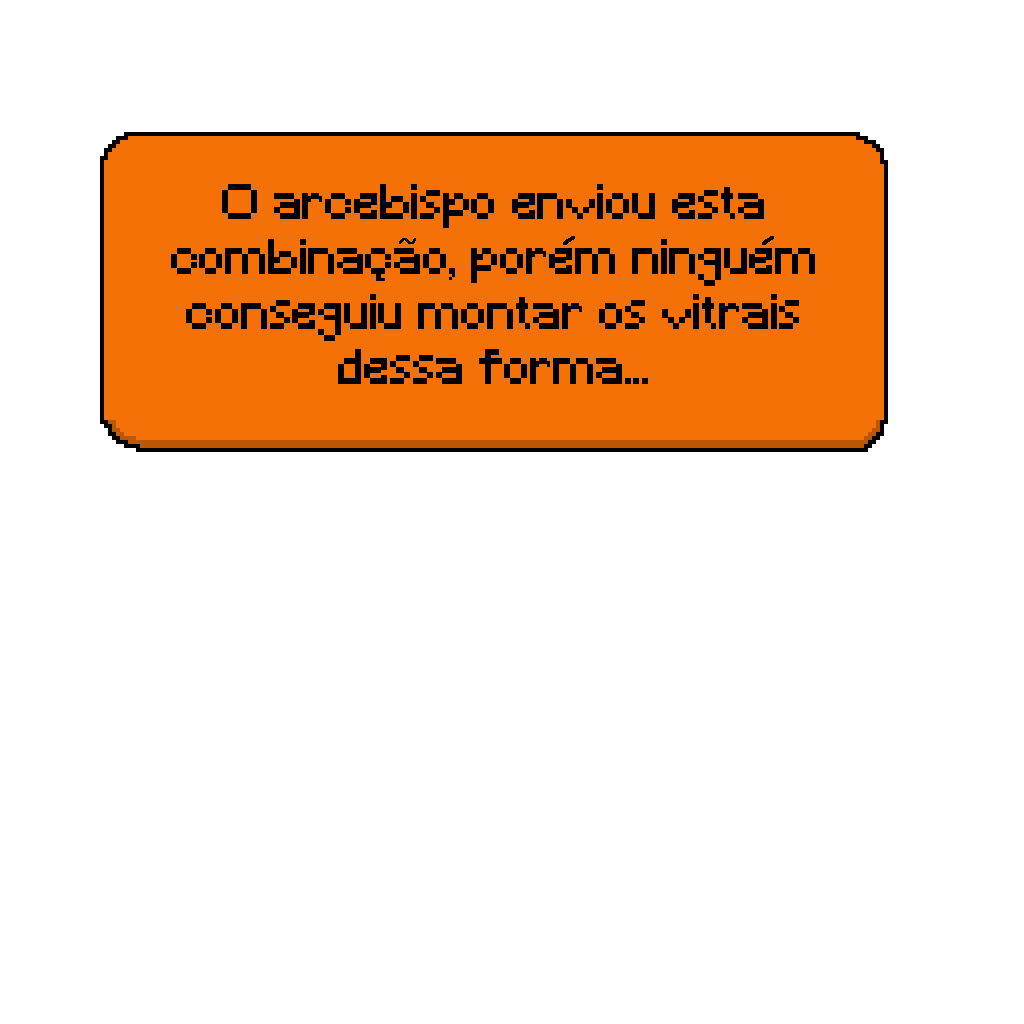
<style>
.page{position:relative;width:1024px;height:1024px;background:#ffffff}
.page>*{position:absolute;margin:0}
.t1{font:45.8px "Minecraft";color:#000000}
</style>
<div class="page">
<p class="t1" style="left:171px;top:184px;width:644px;height:200px;text-align:center">O arcebispo enviou esta combinacao, porem ninguem conseguiu montar os vitrais dessa forma...</p>
</div>
